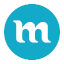
<style>
.page{position:relative;width:64px;height:64px;background:#ffffff}
.page>*{position:absolute;margin:0}
.t1{font:56px "Hulse";color:#13aac9}
</style>
<div class="page">
<p class="t1" style="left:4px;top:4px;width:56px;height:56px">M</p>
</div>
